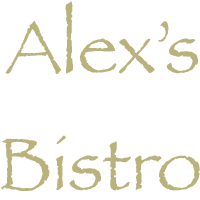
<style>
.page{position:relative;width:200px;height:200px;background:#ffffff}
.page>*{position:absolute;margin:0}
.t1{font:75px "Papyrus";color:#bab27c}
</style>
<div class="page">
<p class="t1" style="left:5px;top:1px;width:193px;height:73px">Alex’s</p>
<p class="t1" style="left:1px;top:135px;width:199px;height:56px">Bistro</p>
</div>
